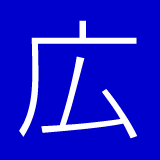
<style>
.page{position:relative;width:160px;height:160px;background:#0000cc}
.page>*{position:absolute;margin:0}
.t1{font:130px "FMotoyaCedar-W1-90msp-RKSJ-H";color:#ffffff}
</style>
<div class="page">
<p class="t1" style="left:19px;top:20px;width:119px;height:119px">広</p>
</div>
